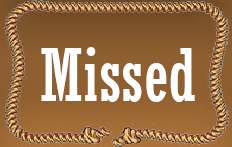
<style>
.page{position:relative;width:232px;height:147px}
.page>*{position:absolute;margin:0}
.t1{font:72px "Rockwell-Condensed";color:#ffffff}
</style>
<div class="page">
<p class="t1" style="left:41px;top:47px;width:154px;height:55px">Missed</p>
</div>
